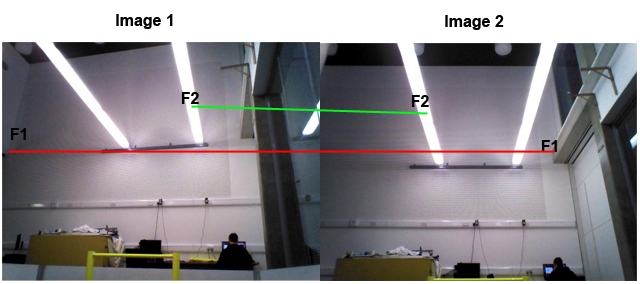
<style>
.page{position:relative;width:640px;height:284px}
.page>*{position:absolute;margin:0}
.t1{font:16px "Arial-BoldMT";color:#000000}
</style>
<div class="page">
<p class="t1" style="left:116px;top:14px;width:57px;height:15px">Image 1</p>
<p class="t1" style="left:445px;top:15px;width:59px;height:15px">Image 2</p>
<p class="t1" style="left:181px;top:92px;width:18px;height:12px">F2</p>
<p class="t1" style="left:411px;top:95px;width:18px;height:12px">F2</p>
<p class="t1" style="left:10px;top:128px;width:16px;height:12px">F1</p>
<p class="t1" style="left:541px;top:140px;width:16px;height:12px">F1</p>
</div>
